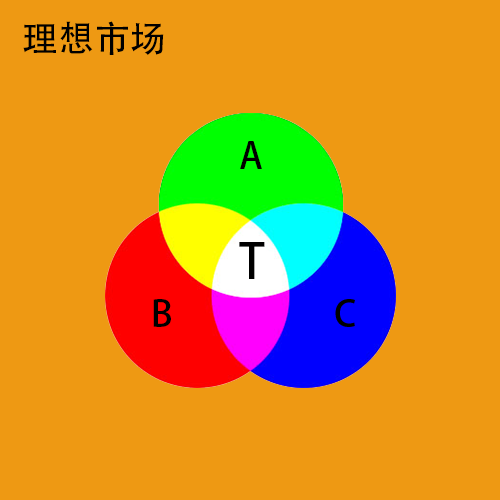
<style>
.page{position:relative;width:500px;height:500px;background:#ee9913}
.page>*{position:absolute;margin:0}
.t1{font:36px "AdobeHeitiStd-Regular";color:#000000}
.t2{font:48px "AdobeHeitiStd-Regular";color:#000000}
</style>
<div class="page">
<p class="t1" style="left:23px;top:21px;width:141px;height:34px">理想市场</p>
<p class="t1" style="left:240px;top:141px;width:22px;height:28px">A</p>
<p class="t2" style="left:239px;top:242px;width:26px;height:37px">T</p>
<p class="t1" style="left:153px;top:299px;width:18px;height:28px">B</p>
</div>
